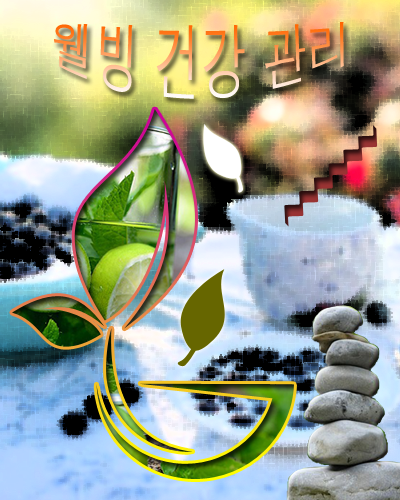
<style>
.page{position:relative;width:400px;height:500px}
.page>*{position:absolute;margin:0}
.t1{font:45px "Dotum"}
</style>
<div class="page">
<p class="t1" style="left:54px;top:22px;width:290px;height:77px;text-align:center">웰빙 건강 관리</p>
</div>
